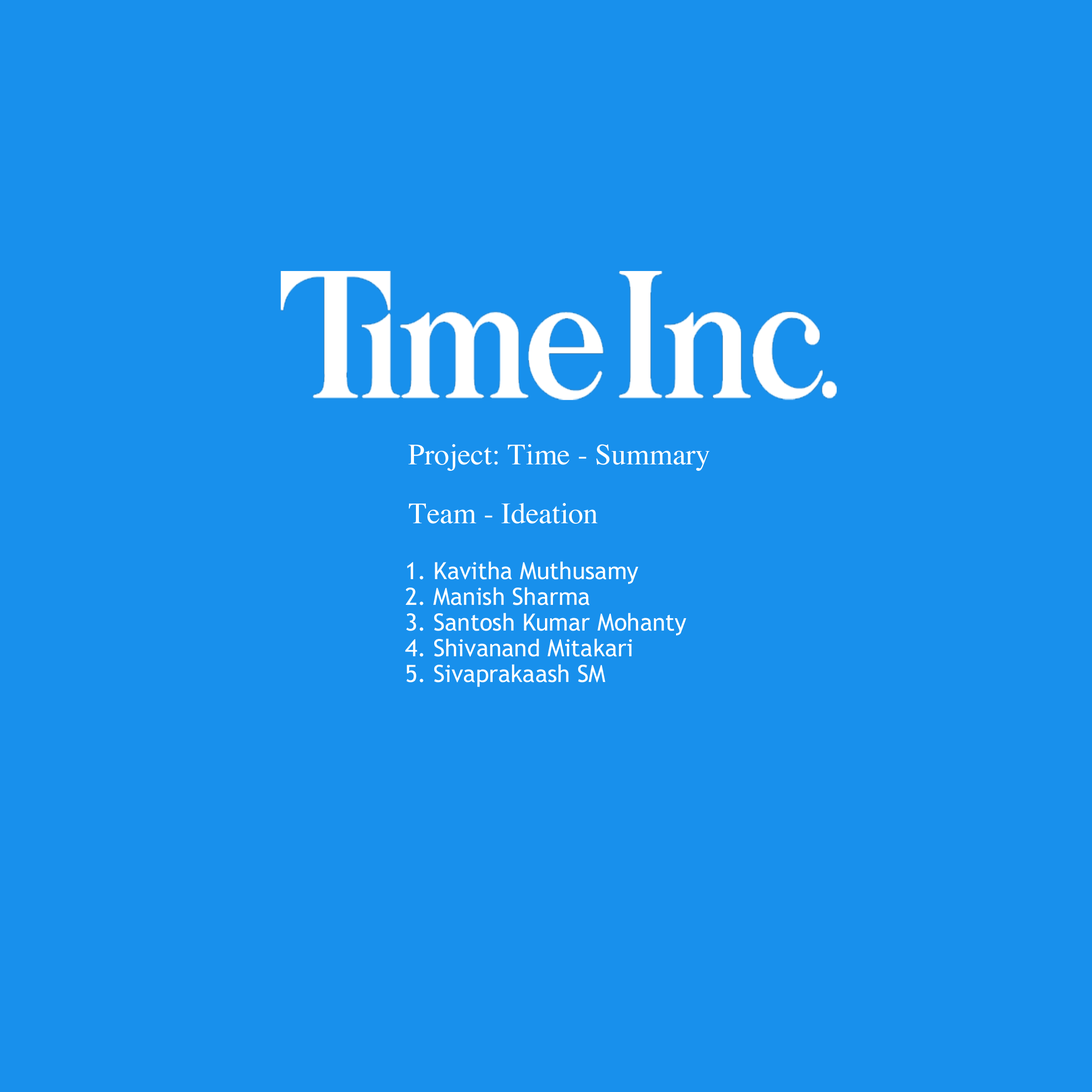
<style>
.page{position:relative;width:1092px;height:1092px;background:#1890ec}
.page>*{position:absolute;margin:0}
.t1{font:29.7px "Times-Roman";color:#ffffff}
.t2{font:23.7px/25.7px "TrebuchetMS";color:#ffffff}
</style>
<div class="page">
<p class="t1" style="left:408px;top:444px;width:302px;height:27px">Project: Time - Summary</p>
<p class="t1" style="left:409px;top:503px;width:189px;height:21px">Team - Ideation</p>
<p class="t2" style="left:405px;top:561px;width:281px;height:126px">1. Kavitha Muthusamy<br>2. Manish Sharma<br>3. Santosh Kumar Mohanty<br>4. Shivanand Mitakari<br>5. Sivaprakaash SM</p>
</div>
